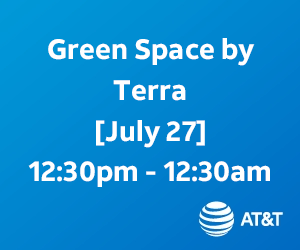
<style>
.page{position:relative;width:300px;height:250px}
.page>*{position:absolute;margin:0}
.t1{font:28.1px/40.7px "ATTAleckSans_Bold";color:#ffffff}
</style>
<div class="page">
<p class="t1" style="left:28px;top:38px;width:242px;height:149px;text-align:center">Green Space by <br>Terra<br>[July 27] <br>12:30pm - 12:30am</p>
</div>
